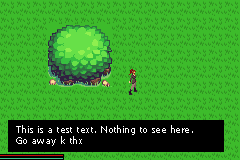
<style>
.page{position:relative;width:240px;height:160px;background:#3dbb2b}
.page>*{position:absolute;margin:0}
.t1{font:9px "Tahoma";letter-spacing:0.05em;color:#ffffff}
</style>
<div class="page">
<p class="t1" style="left:16px;top:125px;width:177px;height:21px">This is a test text. Nothing to see here.<br>Go away k thx</p>
</div>
